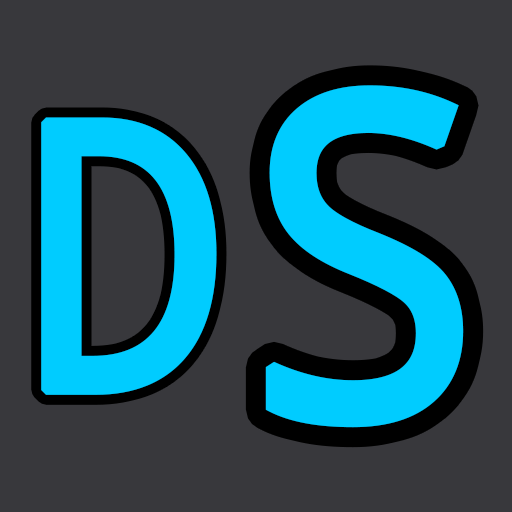
<style>
.page{position:relative;width:512px;height:512px;background:#38383c}
.page>*{position:absolute;margin:0}
.t1{font:450px "NotoMono";color:#00ccff;font-weight:bold;scale:0.89 1}
.t2{font:375px "NotoMono";color:#00ccff;font-weight:bold;scale:0.89 1}
</style>
<div class="page">
<p class="t1" style="left:265px;top:85px;width:199px;height:343px">S</p>
<p class="t2" style="left:41px;top:117px;width:176px;height:278px">D</p>
</div>
